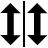
<style>
.page{position:relative;width:48px;height:48px;background:#ffffff}
.page>*{position:absolute;margin:0}
.t1{font:41.2px "ModernPictograms";letter-spacing:-0.6em;color:#000000}
</style>
<div class="page">
<p class="t1" style="left:0px;top:3px;width:21px;height:43px">[]</p>
<p class="t1" style="left:27px;top:3px;width:21px;height:43px">[]</p>
</div>
